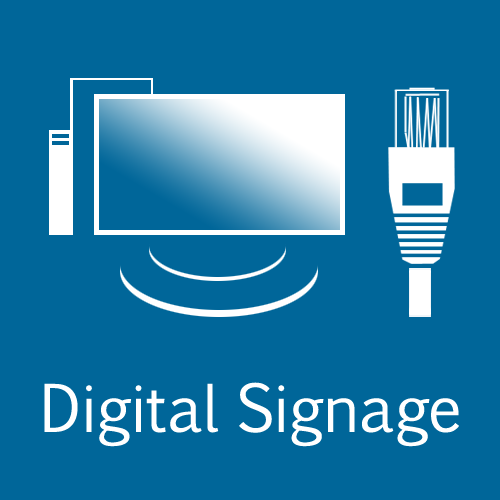
<style>
.page{position:relative;width:500px;height:500px;background:#006699}
.page>*{position:absolute;margin:0}
.t1{font:62.5px "EuphemiaCAS";color:#ffffff}
</style>
<div class="page">
<p class="t1" style="left:44px;top:382px;width:415px;height:65px">Digital Signage</p>
</div>
